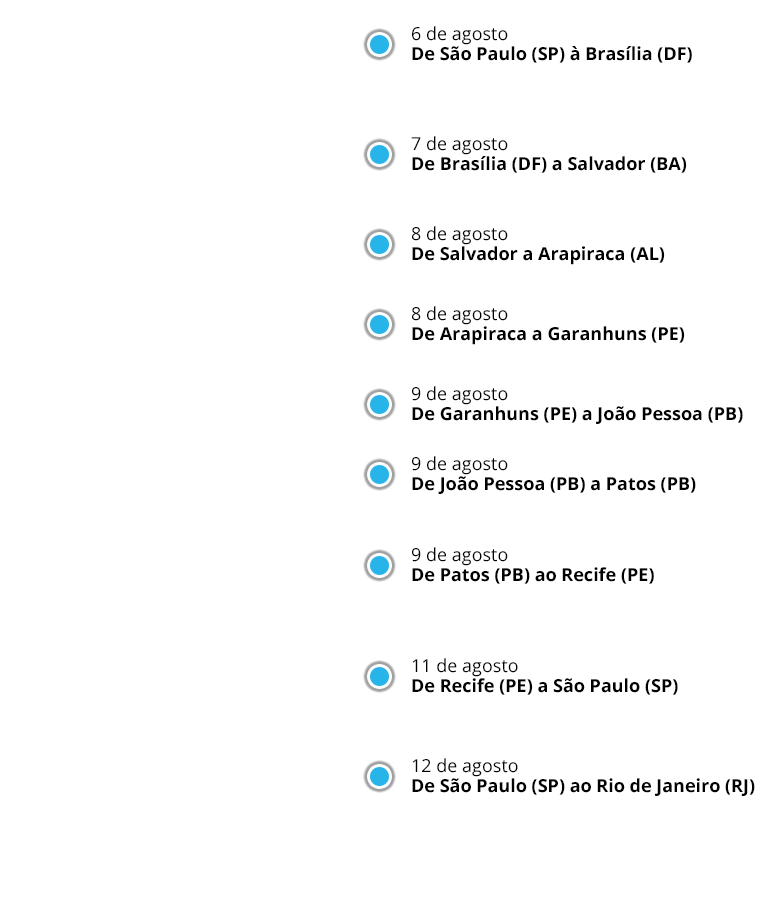
<style>
.page{position:relative;width:778px;height:900px;background:#ffffff}
.page>*{position:absolute;margin:0}
.t1{font:18px "OpenSans";color:#000100}
.t2{font:18px "OpenSans-Bold";color:#000100}
</style>
<div class="page">
<p class="t1" style="left:412px;top:26px;width:96px;height:19px">6 de agosto</p>
<p class="t2" style="left:412px;top:46px;width:280px;height:17px">De São Paulo (SP) à Brasília (DF)</p>
<p class="t1" style="left:411px;top:136px;width:97px;height:19px">7 de agosto</p>
<p class="t2" style="left:412px;top:156px;width:275px;height:17px">De Brasília (DF) a Salvador (BA)</p>
<p class="t1" style="left:412px;top:226px;width:96px;height:19px">8 de agosto</p>
<p class="t2" style="left:412px;top:246px;width:253px;height:19px">De Salvador a Arapiraca (AL)</p>
<p class="t1" style="left:412px;top:306px;width:96px;height:19px">8 de agosto</p>
<p class="t2" style="left:412px;top:326px;width:273px;height:19px">De Arapiraca a Garanhuns (PE)</p>
<p class="t1" style="left:412px;top:386px;width:96px;height:19px">9 de agosto</p>
<p class="t2" style="left:412px;top:406px;width:331px;height:18px">De Garanhuns (PE) a João Pessoa (PB)</p>
<p class="t1" style="left:412px;top:456px;width:96px;height:19px">9 de agosto</p>
<p class="t2" style="left:412px;top:476px;width:284px;height:18px">De João Pessoa (PB) a Patos (PB)</p>
<p class="t1" style="left:412px;top:547px;width:96px;height:19px">9 de agosto</p>
<p class="t2" style="left:412px;top:567px;width:242px;height:17px">De Patos (PB) ao Recife (PE)</p>
<p class="t1" style="left:412px;top:658px;width:106px;height:19px">11 de agosto</p>
<p class="t2" style="left:412px;top:678px;width:266px;height:17px">De Recife (PE) a São Paulo (SP)</p>
<p class="t1" style="left:412px;top:758px;width:106px;height:19px">12 de agosto</p>
<p class="t2" style="left:412px;top:778px;width:343px;height:18px">De São Paulo (SP) ao Rio de Janeiro (RJ)</p>
</div>
